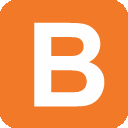
<style>
.page{position:relative;width:128px;height:128px;background:#f27928}
.page>*{position:absolute;margin:0}
.t1{font:116.7px "Arial-BoldMT";color:#fefefe}
</style>
<div class="page">
<p class="t1" style="left:34px;top:22px;width:71px;height:85px">B</p>
</div>
